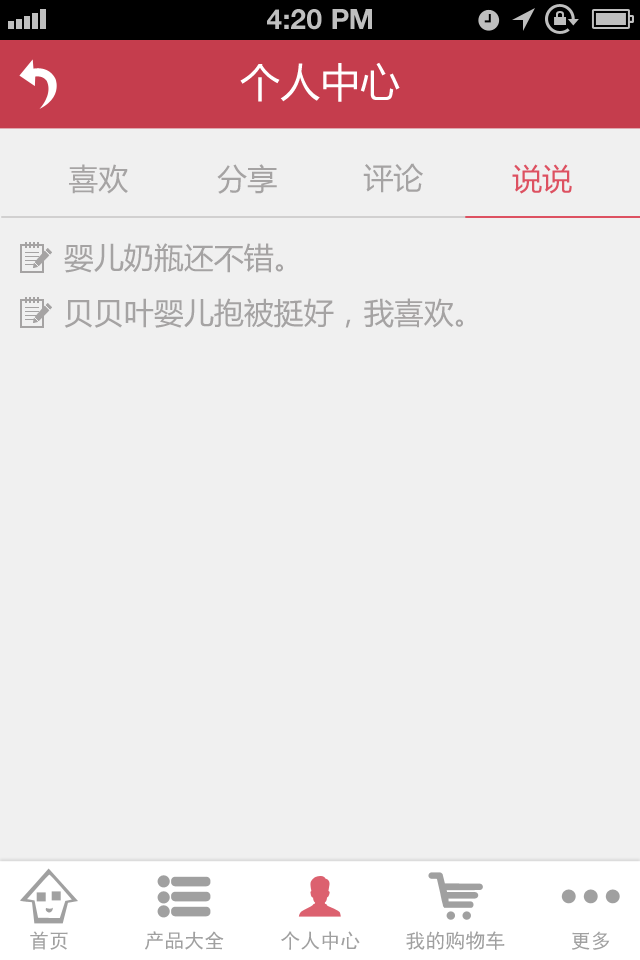
<style>
.page{position:relative;width:640px;height:960px;background:#f0f0f0}
.page>*{position:absolute;margin:0}
.t1{font:28px "HelveticaNeue-Bold";color:#bfbfbf;text-transform:uppercase}
.t2{font:40px "MicrosoftYaHei";color:#ffffff;text-transform:uppercase}
.t3{font:30px "MicrosoftYaHei";color:#a6a4a4;text-transform:uppercase}
.t4{font:30px "MicrosoftYaHei";color:#a5a3a3;text-transform:uppercase}
.t5{font:30px "MicrosoftYaHei";color:#dd5161;text-transform:uppercase}
.t6{font:30px "MicrosoftYaHei";color:#a5a3a3}
.t7{font:20px "SimHei";color:#a0a0a0}
</style>
<div class="page">
<p class="t1" style="left:267px;top:9px;width:105px;height:21px">4:20 PM</p>
<p class="t2" style="left:240px;top:62px;width:160px;height:40px">个人中心</p>
<p class="t3" style="left:69px;top:164px;width:59px;height:30px">喜欢</p>
<p class="t4" style="left:217px;top:164px;width:60px;height:30px">分享</p>
<p class="t4" style="left:363px;top:163px;width:60px;height:30px">评论</p>
<p class="t5" style="left:512px;top:164px;width:60px;height:30px">说说</p>
<p class="t6" style="left:64px;top:243px;width:219px;height:30px">婴儿奶瓶还不错。</p>
<p class="t6" style="left:64px;top:298px;width:399px;height:30px">贝贝叶婴儿抱被挺好，我喜欢。</p>
<p class="t7" style="left:30px;top:931px;width:38px;height:19px">首页</p>
<p class="t7" style="left:145px;top:931px;width:79px;height:19px">产品大全</p>
<p class="t7" style="left:281px;top:931px;width:79px;height:19px">个人中心</p>
<p class="t7" style="left:406px;top:931px;width:99px;height:19px">我的购物车</p>
<p class="t7" style="left:572px;top:931px;width:38px;height:19px">更多</p>
</div>
